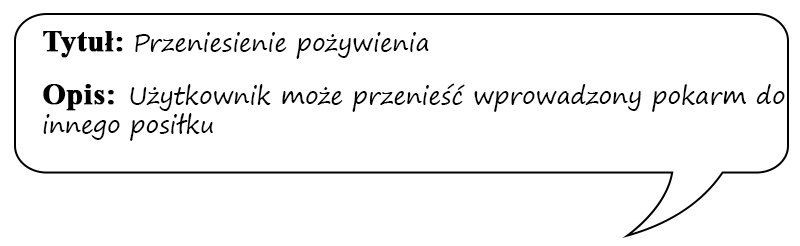
<style>
.page{position:relative;width:800px;height:246px;background:#ffffff}
.page>*{position:absolute;margin:0}
.t1{font:24px "SegoePrint";color:#000000}
.t2{font:30px "TimesNewRomanPS-BoldMT";color:#000000;font-weight:bold}
</style>
<div class="page">
<p class="t1" style="left:43px;top:31px;width:742px;height:110px"><span class="t2">Tytuł: </span>Przeniesienie pożywienia<br><br><span class="t2">Opis:  </span>Użytkownik może przenieść wprowadzony pokarm do innego posiłku</p>
</div>
